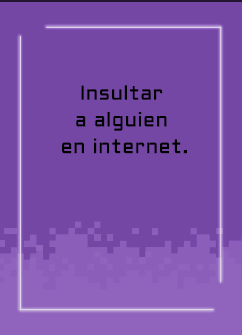
<style>
.page{position:relative;width:242px;height:335px;background:#7547a5}
.page>*{position:absolute;margin:0}
.t1{font:20px/26.7px "Aldrich-Regular";letter-spacing:0.025em;color:#000000}
</style>
<div class="page">
<p class="t1" style="left:62px;top:85px;width:125px;height:69px;text-align:center">Insultar <br>a alguien <br>en internet.</p>
</div>
